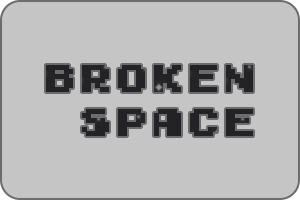
<style>
.page{position:relative;width:300px;height:200px;background:#c5c5c5}
.page>*{position:absolute;margin:0}
.t1{font:36px "Early-GameBoy";color:#232325}
</style>
<div class="page">
<p class="t1" style="left:46px;top:65px;width:207px;height:71px">BROKEN<br> SPACE</p>
</div>
